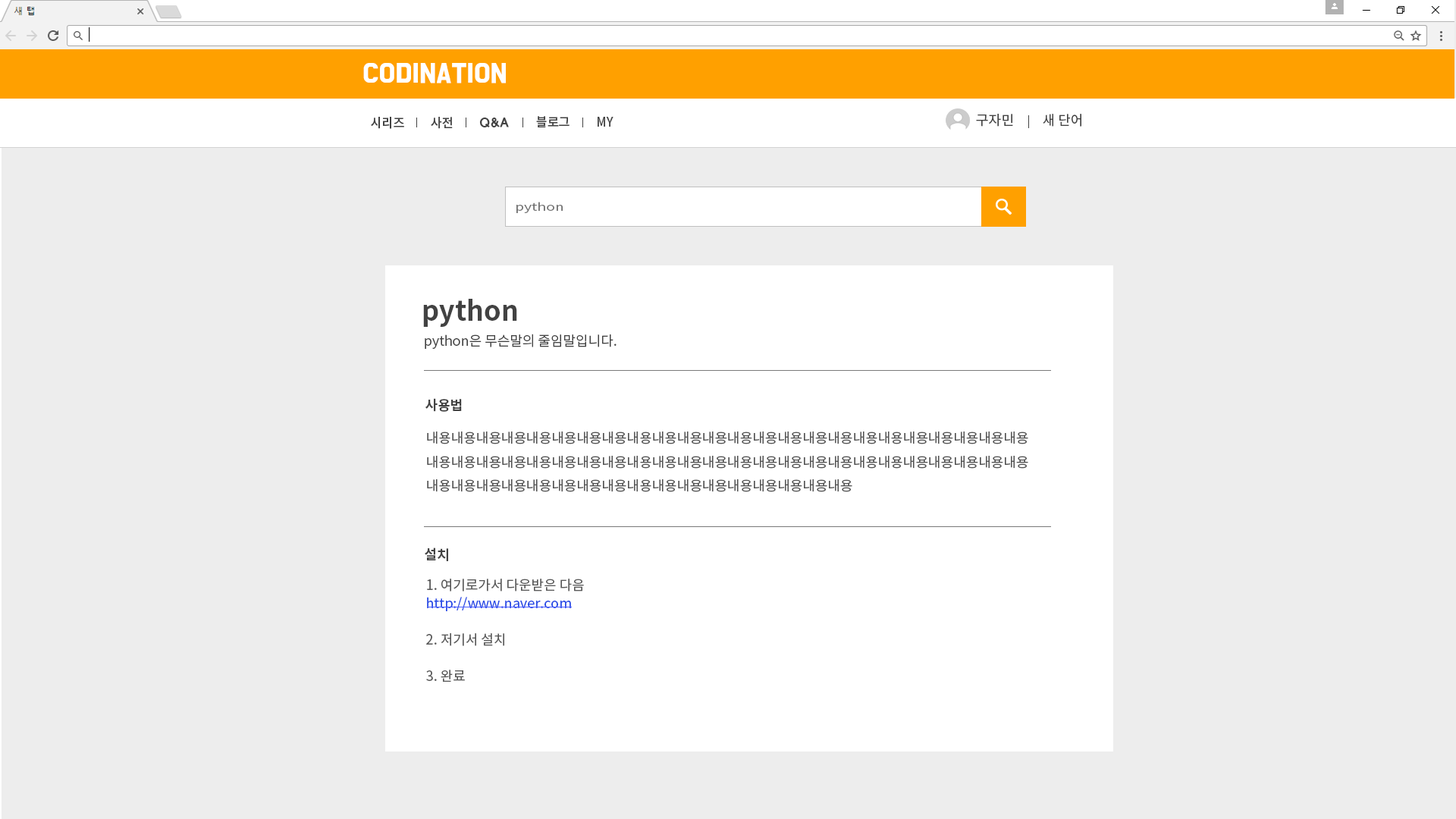
<style>
.page{position:relative;width:1456px;height:819px;background:#ededed}
.page>*{position:absolute;margin:0}
.t1{font:22.7px "BMDoHyeon";color:#ffffff;font-weight:bold}
.t2{font:13.6px "NotoSansCJKkr-Regular";color:#424242}
.t3{font:12.6px "NotoSansCJKkr-Medium";letter-spacing:-0.01em;color:#424242}
.t4{font:12.6px "HYwulB";letter-spacing:-0.025em;color:#424242}
.t5{font:11.3px "NotoSansCJKkr-DemiLight";color:#727272;scale:1.32 1}
.t6{font:27.3px "NotoSansCJKkr-Bold";color:#424242}
.t7{font:13.6px "NotoSansCJKkr-DemiLight";color:#424242}
.t8{font:13.6px "NotoSansCJKkr-Bold";color:#424242}
.t9{font:13.6px "NotoSansCJKkr-Regular";color:#525252}
.t10{font:13.6px/18.2px "NotoSansCJKkr-Regular";color:#284ce5}
.t11{font:13.6px/18.2px "NotoSansCJKkr-Regular";color:#595959}
</style>
<div class="page">
<p class="t1" style="left:363px;top:63px;width:143px;height:20px">CODINATION</p>
<p class="t2" style="left:976px;top:114px;width:37px;height:13px">구자민</p>
<p class="t2" style="left:1043px;top:114px;width:38px;height:13px">새 단어</p>
<p class="t3" style="left:371px;top:117px;width:33px;height:12px">시리즈</p>
<p class="t3" style="left:431px;top:117px;width:22px;height:12px">사전</p>
<p class="t4" style="left:479px;top:118px;width:30px;height:9px">Q&amp;A</p>
<p class="t3" style="left:536px;top:116px;width:34px;height:11px">블로그</p>
<p class="t3" style="left:598px;top:117px;width:15px;height:10px">MY</p>
<p class="t5" style="left:516px;top:202px;width:47px;height:11px">python</p>
<p class="t6" style="left:423px;top:299px;width:94px;height:28px">python</p>
<p class="t7" style="left:425px;top:334px;width:192px;height:15px">python은 무슨말의 줄임말입니다.</p>
<p class="t8" style="left:425px;top:398px;width:37px;height:14px">사용법</p>
<p class="t9" style="left:427px;top:431px;width:601px;height:61px">내용내용내용내용내용내용내용내용내용내용내용내용내용내용내용내용내용내용내용내용내용내용내용내용내용내용내용내용내용내용내용내용내용내용내용내용내용내용내용내용내용내용내용내용내용내용내용내용내용내용내용내용내용내용내용내용내용내용내용내용내용내용내용내용내용</p>
<p class="t8" style="left:425px;top:548px;width:23px;height:13px">설치</p>
<p class="t10" style="left:426px;top:579px;width:158px;height:103px"><span class="t11">1. 여기로가서 다운받은 다음<br></span>http://www.naver.com<br><span class="t11"><br>2. 저기서 설치<br><br>3. 완료</span></p>
</div>
